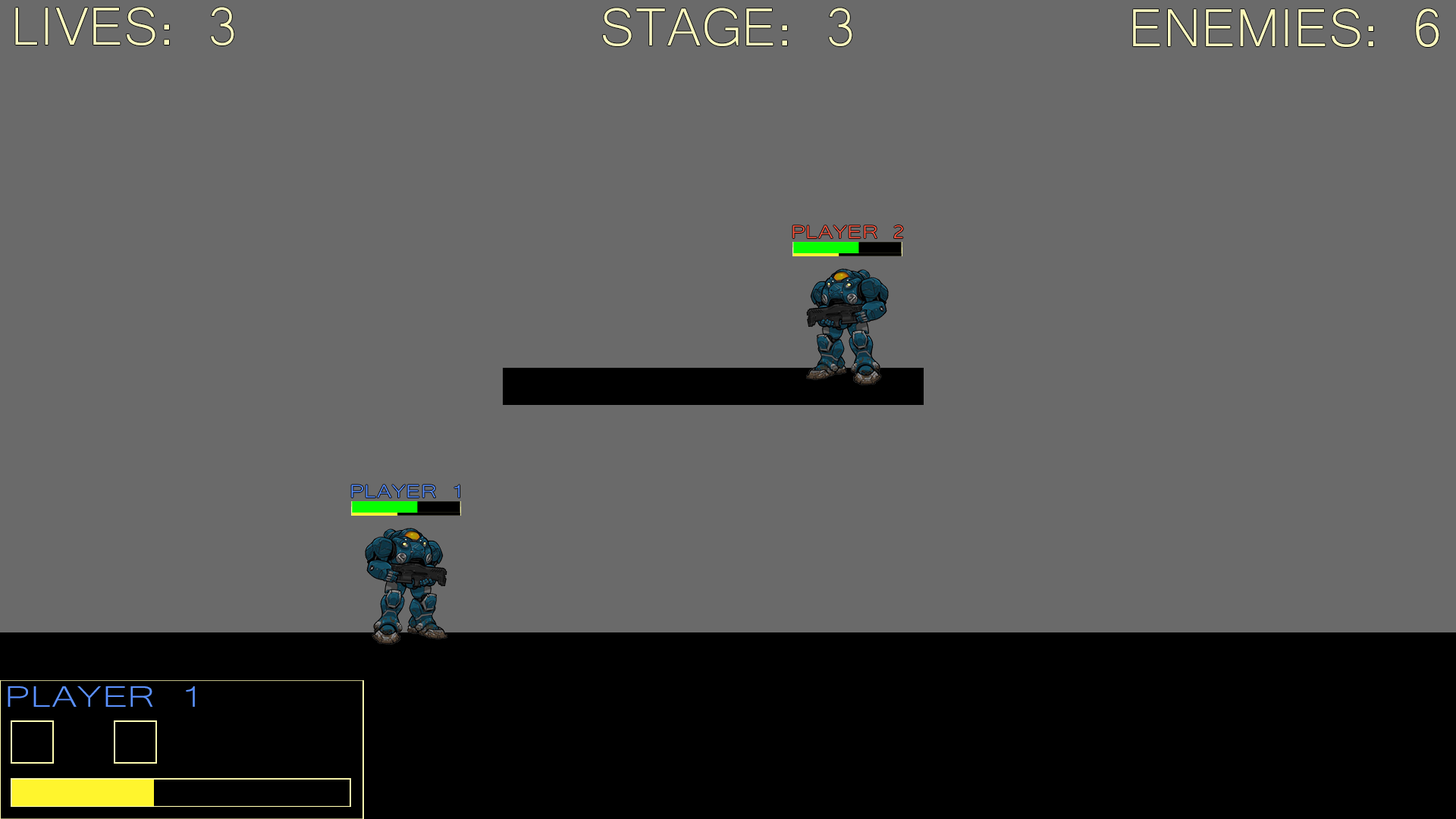
<style>
.page{position:relative;width:1456px;height:819px;background:#6a6a6a}
.page>*{position:absolute;margin:0}
.t1{font:69.1px "Microsoft-Yi-Baiti";color:#fbf8c0}
.t2{font:23.4px "Microsoft-Yi-Baiti";color:#ff5c45;scale:1.24 1}
.t3{font:23.4px "Microsoft-Yi-Baiti";color:#5c92ff;scale:1.24 1}
.t4{font:38.3px "Microsoft-Yi-Baiti";color:#5c92ff;scale:1.32 1}
</style>
<div class="page">
<p class="t1" style="left:15px;top:7px;width:219px;height:38px">LIVES: 3</p>
<p class="t1" style="left:603px;top:8px;width:249px;height:38px">STAGE: 3</p>
<p class="t1" style="left:1133px;top:8px;width:306px;height:39px">ENEMIES: 6</p>
<p class="t2" style="left:792px;top:225px;width:111px;height:14px">PLAYER 2</p>
<p class="t3" style="left:351px;top:485px;width:109px;height:13px">PLAYER 1</p>
<p class="t4" style="left:8px;top:686px;width:187px;height:21px">PLAYER 1</p>
</div>
